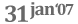
<style>
.page{position:relative;width:78px;height:24px;background:#ffffff}
.page>*{position:absolute;margin:0}
.t1{font:24px "Cambria-Bold";letter-spacing:-0.1em;color:#686868}
.t2{font:18.7px "Cambria-Bold";letter-spacing:-0.05em;color:#686868}
.t3{font:16px "Cambria-Bold";letter-spacing:-0.1em;color:#686868}
</style>
<div class="page">
<p class="t1" style="left:5px;top:5px;width:23px;height:17px">31</p>
<p class="t2" style="left:30px;top:2px;width:25px;height:18px">jan</p>
<p class="t3" style="left:55px;top:3px;width:19px;height:12px">‘07</p>
</div>
